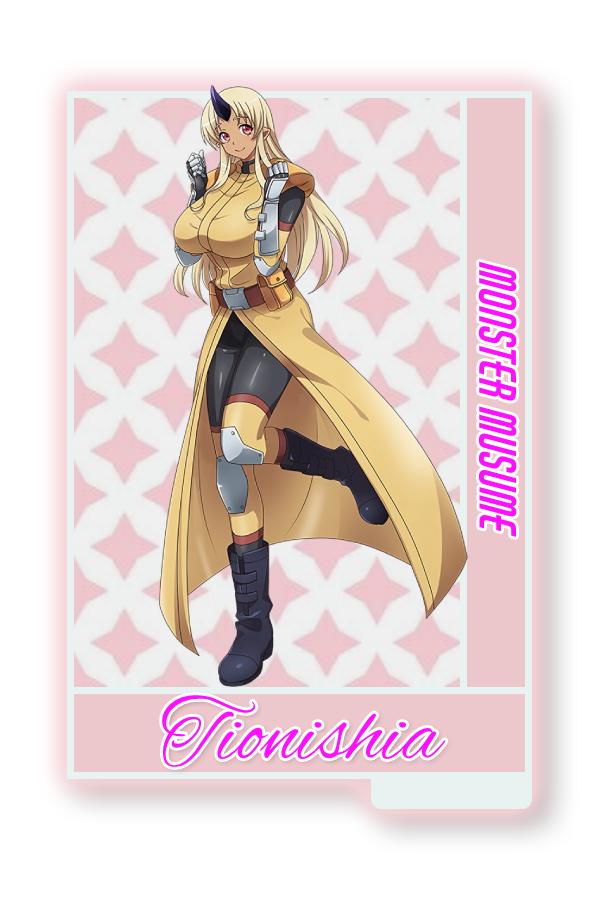
<style>
.page{position:relative;width:600px;height:900px;background:#ffffff}
.page>*{position:absolute;margin:0}
.t1{font:48.8px "AirAmerica-Regular";color:#ff0fff}
.t2{font:88px "AlexBrush-Regular";color:#ff0fff}
</style>
<div class="page">
<p class="t1" style="left:478px;top:261px;width:39px;height:276px;rotate:90deg">Monster Musume</p>
<p class="t2" style="left:162px;top:695px;width:284px;height:72px">Tionishia</p>
</div>
